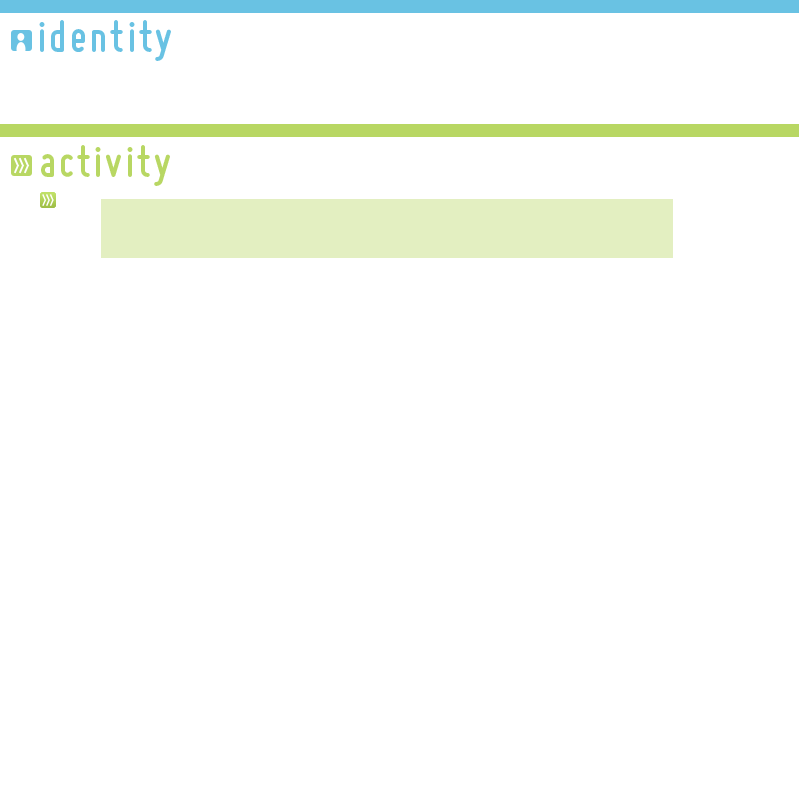
<style>
.page{position:relative;width:800px;height:800px;background:#ffffff}
.page>*{position:absolute;margin:0}
.t1{font:45.6px "Miso-Bold";letter-spacing:0.065em;color:#69c2e3}
.t2{font:45.6px "Miso-Bold";letter-spacing:0.065em;color:#b8d763}
</style>
<div class="page">
<p class="t1" style="left:39px;top:20px;width:132px;height:41px">identity</p>
<p class="t2" style="left:41px;top:145px;width:129px;height:41px">activity</p>
</div>
